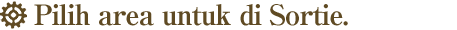
<style>
.page{position:relative;width:457px;height:30px;background:#ffffff}
.page>*{position:absolute;margin:0}
.t1{font:28px "RyuminPro-ExBold";letter-spacing:-0.04em;color:#5f4a23}
</style>
<div class="page">
<p class="t1" style="left:34px;top:4px;width:314px;height:22px">Pilih area untuk di Sortie.</p>
</div>
